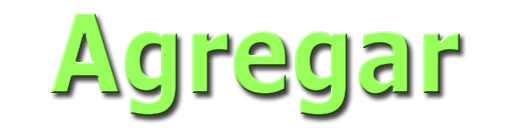
<style>
.page{position:relative;width:512px;height:128px;background:#ffffff}
.page>*{position:absolute;margin:0}
.t1{font:109.7px "Verdana-Bold";color:#99ff5b;scale:0.83 1}
</style>
<div class="page">
<p class="t1" style="left:51px;top:13px;width:409px;height:103px">Agregar</p>
</div>
